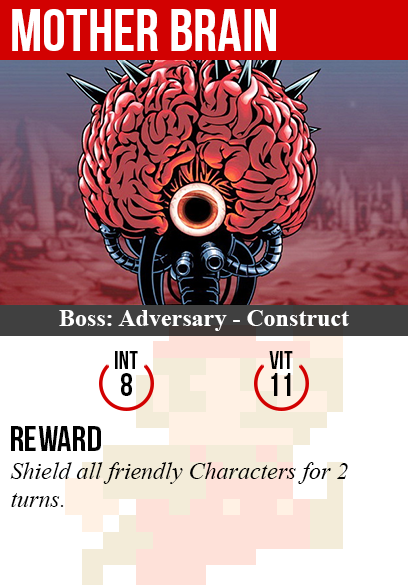
<style>
.page{position:relative;width:408px;height:585px;background:#ffffff}
.page>*{position:absolute;margin:0}
.t1{font:60px "BebasNeue";color:#ffffff}
.t2{font:24px "TimesNewRomanPS-BoldMT";color:#ffffff}
.t3{font:25px "BebasNeue";color:#000000}
.t4{font:32px "BebasNeue";color:#000000}
.t5{font:36px "BebasNeue";color:#000000}
.t6{font:24px "TimesNewRomanPS-ItalicMT";color:#000000}
</style>
<div class="page">
<p class="t1" style="left:12px;top:9px;width:264px;height:42px">mother brain</p>
<p class="t2" style="left:59px;top:310px;width:290px;height:21px">Boss: Adversary - Construct</p>
<p class="t3" style="left:115px;top:351px;width:23px;height:18px">int</p>
<p class="t3" style="left:269px;top:351px;width:24px;height:18px">vit</p>
<p class="t4" style="left:121px;top:373px;width:11px;height:23px">8</p>
<p class="t4" style="left:271px;top:373px;width:20px;height:23px">11</p>
<p class="t5" style="left:11px;top:426px;width:90px;height:25px">reward</p>
<p class="t6" style="left:10px;top:462px;width:338px;height:45px">Shield all friendly Characters for 2<br>turns.</p>
</div>
